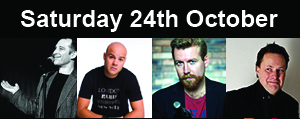
<style>
.page{position:relative;width:300px;height:119px;background:#060808}
.page>*{position:absolute;margin:0}
.t1{font:24px "Arial-BoldMT";color:#ffffff}
</style>
<div class="page">
<p class="t1" style="left:20px;top:10px;width:258px;height:22px">Saturday 24th October</p>
</div>
